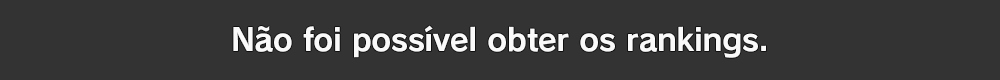
<style>
.page{position:relative;width:1000px;height:80px;background:#333333}
.page>*{position:absolute;margin:0}
.t1{font:30.7px "RodinPro-B";letter-spacing:-0.01em;color:#fbfafb}
</style>
<div class="page">
<p class="t1" style="left:233px;top:25px;width:533px;height:33px">Não foi possível obter os rankings.</p>
</div>
